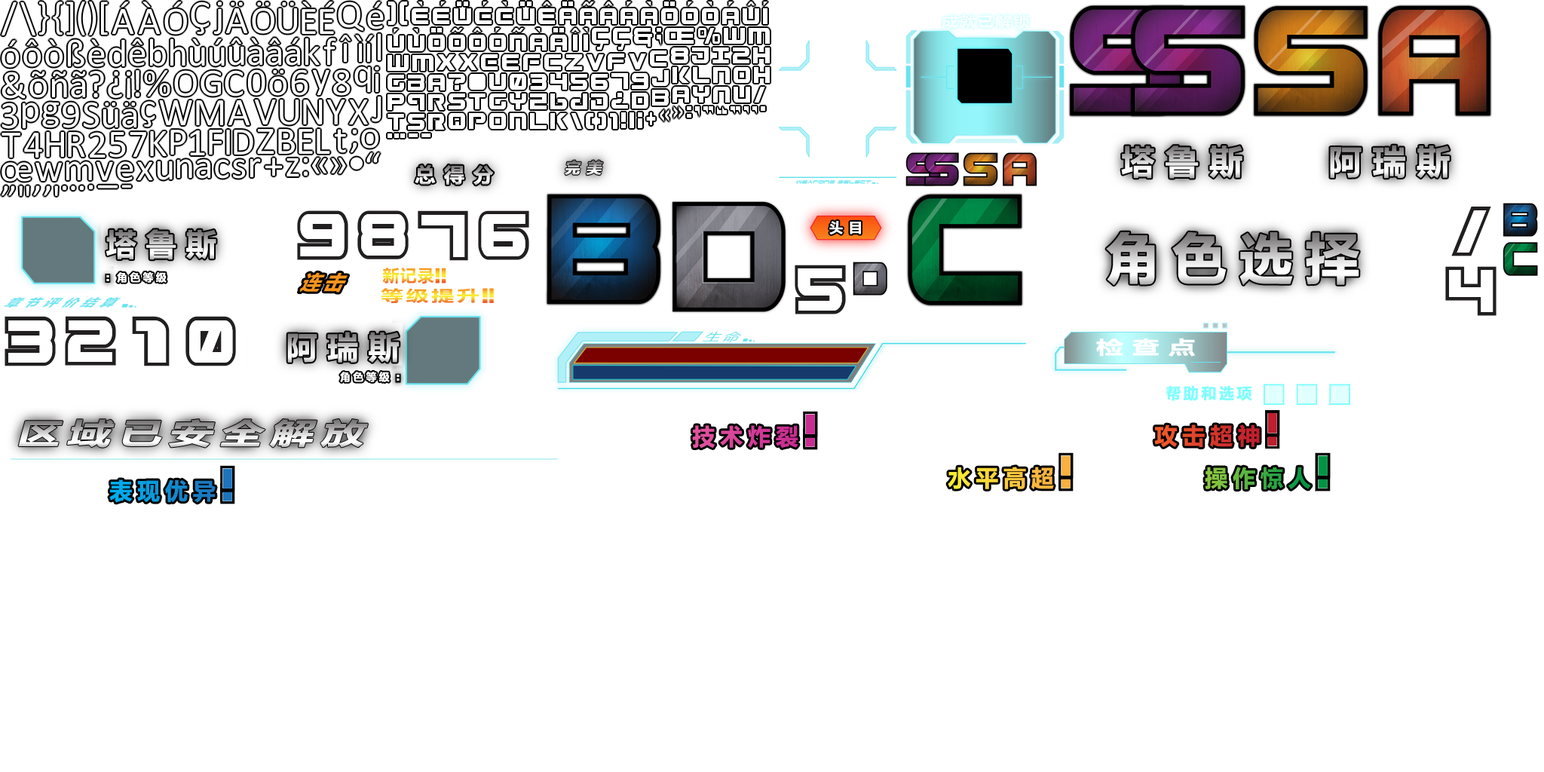
<style>
.page{position:relative;width:1544px;height:772px;background:#ffffff}
.page>*{position:absolute;margin:0}
.t1{font:13.6px "MicrosoftYaHei-Bold";letter-spacing:0.1em;color:#ffffff;scale:1.2 1}
.t2{font:33.2px "MicrosoftYaHei-Bold";letter-spacing:0.3em;font-weight:bold}
.t3{font:15.1px "MicrosoftYaHei-Bold";letter-spacing:0.4em;font-weight:bold;font-style:italic}
.t4{font:20.4px "MicrosoftYaHei-Bold";letter-spacing:0.4em;font-weight:bold}
.t5{font:13.6px "MicrosoftYaHei-Bold";letter-spacing:0.4em;color:#ffffff;font-weight:bold}
.t6{font:30.2px "MicrosoftYaHei-Bold";letter-spacing:0.3em;font-weight:bold}
.t7{font:54.3px "MicrosoftYaHei-Bold";letter-spacing:0.2em;font-weight:bold}
.t8{font:16.6px "MicrosoftYaHei-Bold";letter-spacing:0.05em}
.t9{font:10.6px "MicrosoftYaHei-Bold";letter-spacing:0.2em;color:#ffffff;font-weight:bold}
.t10{font:15.1px "MicrosoftYaHei-Bold";letter-spacing:0.12em;scale:1.5 1}
.t11{font:30.9px "MicrosoftYaHei-Bold";letter-spacing:0.3em;font-weight:bold}
.t12{font:18.1px "MicrosoftYaHei-Bold";letter-spacing:0.3em;color:#ffffff;font-weight:bold;scale:1.5 1}
.t13{font:15.1px "MicrosoftYaHei-Bold";letter-spacing:0.15em;color:#7fffff;font-weight:bold}
.t14{font:28.7px "MicrosoftYaHei-Bold";letter-spacing:0.15em;font-weight:bold;font-style:italic;scale:1.5 1}
.t15{font:22.6px "MicrosoftYaHei-Bold";letter-spacing:0.2em;color:#d23d97;font-weight:bold}
.t16{font:22.6px "MicrosoftYaHei-Bold";letter-spacing:0.2em;font-weight:bold}
</style>
<div class="page">
<p class="t1" style="left:942px;top:14px;width:88px;height:15px">成就已解锁</p>
<p class="t2" style="left:1121px;top:146px;width:122px;height:33px">塔鲁斯</p>
<p class="t2" style="left:1330px;top:145px;width:120px;height:34px">阿瑞斯</p>
<p class="t3" style="left:565px;top:160px;width:38px;height:16px">完美</p>
<p class="t4" style="left:415px;top:164px;width:79px;height:21px">总得分</p>
<p class="t5" style="left:829px;top:221px;width:32px;height:14px">头目</p>
<p class="t6" style="left:106px;top:229px;width:110px;height:31px">塔鲁斯</p>
<p class="t7" style="left:1106px;top:231px;width:254px;height:55px">角色选择</p>
<p class="t8" style="left:382px;top:268px;width:52px;height:16px">新记录</p>
<p class="t9" style="left:117px;top:272px;width:50px;height:11px">角色等级</p>
<p class="t10" style="left:381px;top:288px;width:99px;height:15px">等级提升</p>
<p class="t11" style="left:287px;top:332px;width:113px;height:31px">阿瑞斯</p>
<p class="t12" style="left:1096px;top:338px;width:99px;height:19px">检查点</p>
<p class="t9" style="left:340px;top:372px;width:50px;height:10px">角色等级</p>
<p class="t13" style="left:1166px;top:385px;width:86px;height:16px">帮助和选项</p>
<p class="t14" style="left:18px;top:418px;width:350px;height:30px">区域已安全解放</p>
<p class="t15" style="left:692px;top:425px;width:107px;height:24px">技术炸裂</p>
<p class="t16" style="left:1154px;top:425px;width:106px;height:22px">攻击超神</p>
<p class="t16" style="left:948px;top:467px;width:106px;height:22px">水平高超</p>
<p class="t16" style="left:109px;top:480px;width:107px;height:23px">表现优异</p>
</div>
